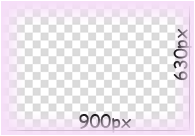
<style>
.page{position:relative;width:195px;height:136px}
.page>*{position:absolute;margin:0}
.t1{font:17.8px "ComicSansMS"}
.t2{font:17.7px "ComicSansMS"}
</style>
<div class="page">
<p class="t1" style="left:173px;top:29px;width:20px;height:52px;rotate:-90deg">630px</p>
<p class="t2" style="left:79px;top:114px;width:52px;height:19px">900px</p>
</div>
